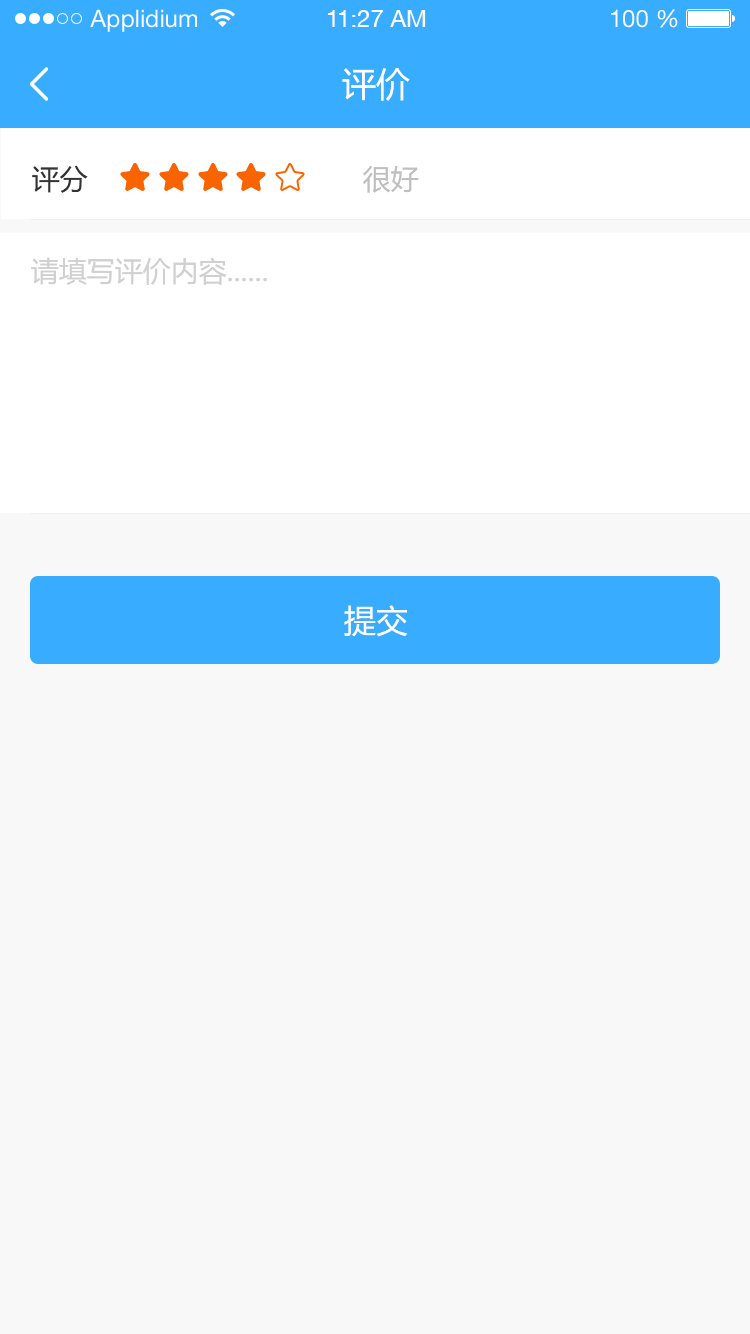
<style>
.page{position:relative;width:750px;height:1334px;background:#f8f8f8}
.page>*{position:absolute;margin:0}
.t1{font:24px "HelveticaNeueLTStd-Roman";color:#ffffff}
.t2{font:24px "HelveticaNeueCE-Roman";color:#ffffff}
.t3{font:34px "MicrosoftYaHei";color:#ffffff}
.t4{font:28px "MicrosoftYaHei";color:#333333}
.t5{font:28px "MicrosoftYaHei";color:#bfbfbf}
.t6{font:28px "MicrosoftYaHei";color:#d0d0d0}
.t7{font:32px "MicrosoftYaHei";color:#ffffff}
</style>
<div class="page">
<p class="t1" style="left:90px;top:9px;width:107px;height:23px">Applidium</p>
<p class="t2" style="left:328px;top:10px;width:98px;height:17px">11:27 AM</p>
<p class="t1" style="left:611px;top:9px;width:67px;height:19px">100 %</p>
<p class="t3" style="left:342px;top:68px;width:68px;height:33px">评价</p>
<p class="t4" style="left:32px;top:165px;width:56px;height:28px">评分</p>
<p class="t5" style="left:363px;top:165px;width:56px;height:28px">很好</p>
<p class="t6" style="left:31px;top:257px;width:236px;height:28px">请填写评价内容......</p>
<p class="t7" style="left:344px;top:605px;width:63px;height:32px">提交</p>
</div>
